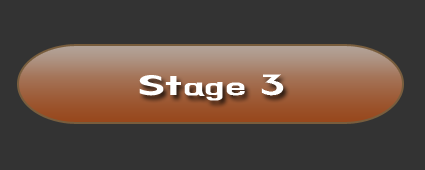
<style>
.page{position:relative;width:425px;height:170px;background:#333333}
.page>*{position:absolute;margin:0}
.t1{font:28px "BMHANNA11yrsold";color:#ffffff;scale:1.5 1}
</style>
<div class="page">
<p class="t1" style="left:139px;top:74px;width:145px;height:27px">Stage 3</p>
</div>
